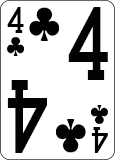
<style>
.page{position:relative;width:115px;height:160px;background:#ffffff}
.page>*{position:absolute;margin:0}
.t1{font:31.1px "CardCharacters";color:#020201;scale:0.95 1}
.t2{font:86.4px "CardCharacters";color:#020201;scale:0.83 1}
</style>
<div class="page">
<p class="t1" style="left:7px;top:7px;width:17px;height:26px">4</p>
<p class="t2" style="left:68px;top:7px;width:40px;height:73px">4</p>
<p class="t2" style="left:7px;top:80px;width:40px;height:73px;rotate:180deg">4</p>
<p class="t1" style="left:91px;top:127px;width:17px;height:26px;rotate:180deg">4</p>
</div>
